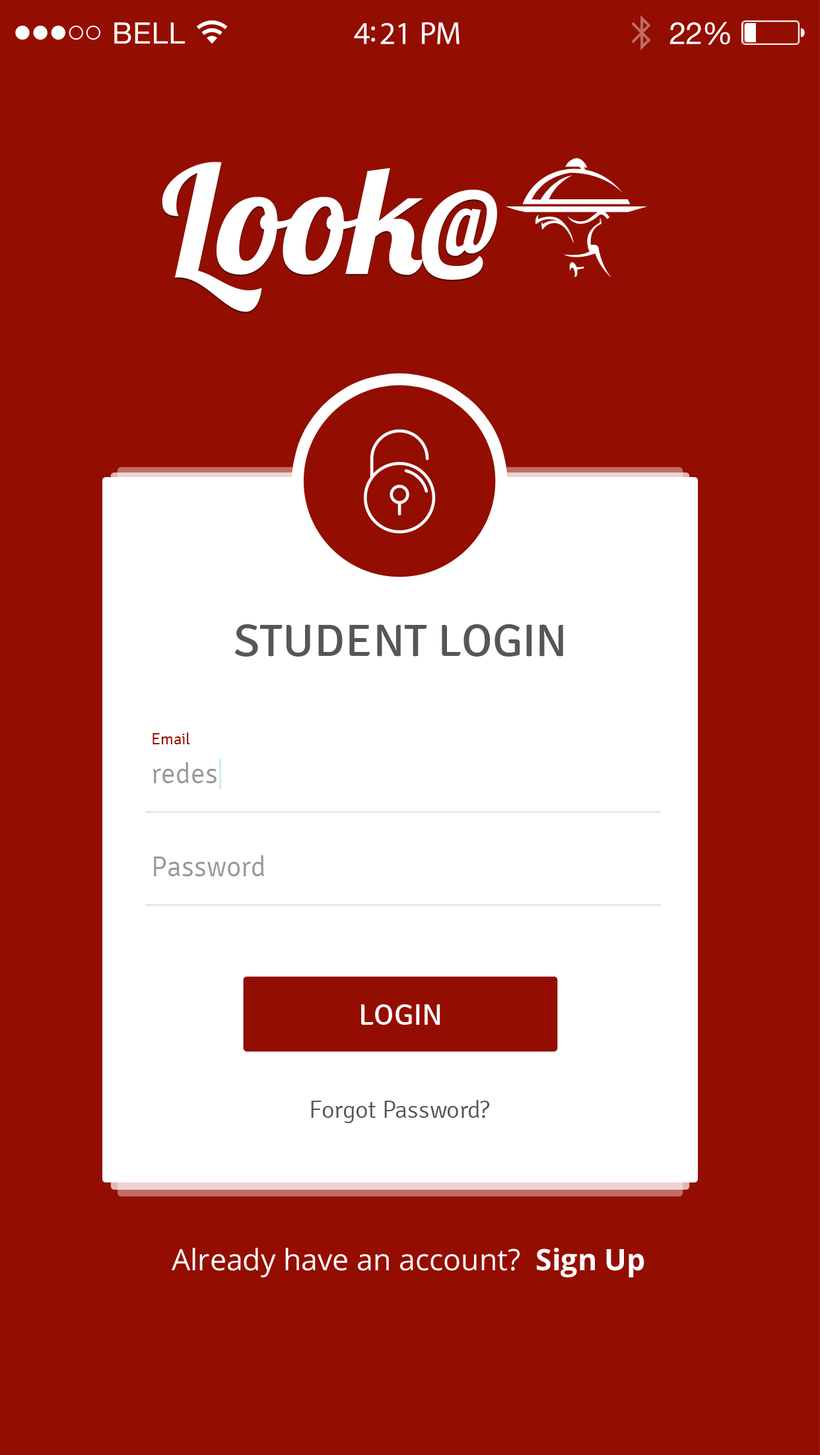
<style>
.page{position:relative;width:820px;height:1455px;background:#930e01}
.page>*{position:absolute;margin:0}
.t1{font:29.5px "HelveticaNeue";letter-spacing:0.02em;color:#ffffff}
.t2{font:32px "MyriadPro-Regular";letter-spacing:-0.02em;color:#ffffff}
.t3{font:30.7px "HelveticaNeue";letter-spacing:-0.02em;color:#ffffff}
.t4{font:151.1px "Lobster1.4";color:#ffffff}
.t5{font:45.7px "Signika-Regular";color:#565656;text-transform:uppercase}
.t6{font:16.3px "Signika-Light";color:#930e01}
.t7{font:28.5px "Signika-Light";color:#989898}
.t8{font:29.9px "Signika-Regular";color:#ffffff;text-transform:uppercase}
.t9{font:24.4px "Signika-Light";color:#565656}
.t10{font:29.5px "OpenSans";color:#ffffff}
.t11{font:29.5px "OpenSans-Bold";color:#ffffff}
</style>
<div class="page">
<p class="t1" style="left:114px;top:22px;width:71px;height:22px">BELL</p>
<p class="t2" style="left:354px;top:22px;width:105px;height:22px">4:21 PM</p>
<p class="t3" style="left:669px;top:22px;width:61px;height:23px">22%</p>
<p class="t4" style="left:162px;top:162px;width:335px;height:150px">Look@</p>
<p class="t5" style="left:235px;top:624px;width:328px;height:33px">Student Login</p>
<p class="t6" style="left:152px;top:732px;width:38px;height:12px">Email</p>
<p class="t7" style="left:152px;top:762px;width:64px;height:21px">redes</p>
<p class="t7" style="left:154px;top:855px;width:110px;height:21px">Password</p>
<p class="t8" style="left:361px;top:1004px;width:79px;height:21px">Login</p>
<p class="t9" style="left:311px;top:1100px;width:179px;height:23px">Forgot Password?</p>
<p class="t10" style="left:172px;top:1248px;width:472px;height:29px">Already have an account?  <span class="t11">Sign Up</span></p>
</div>
